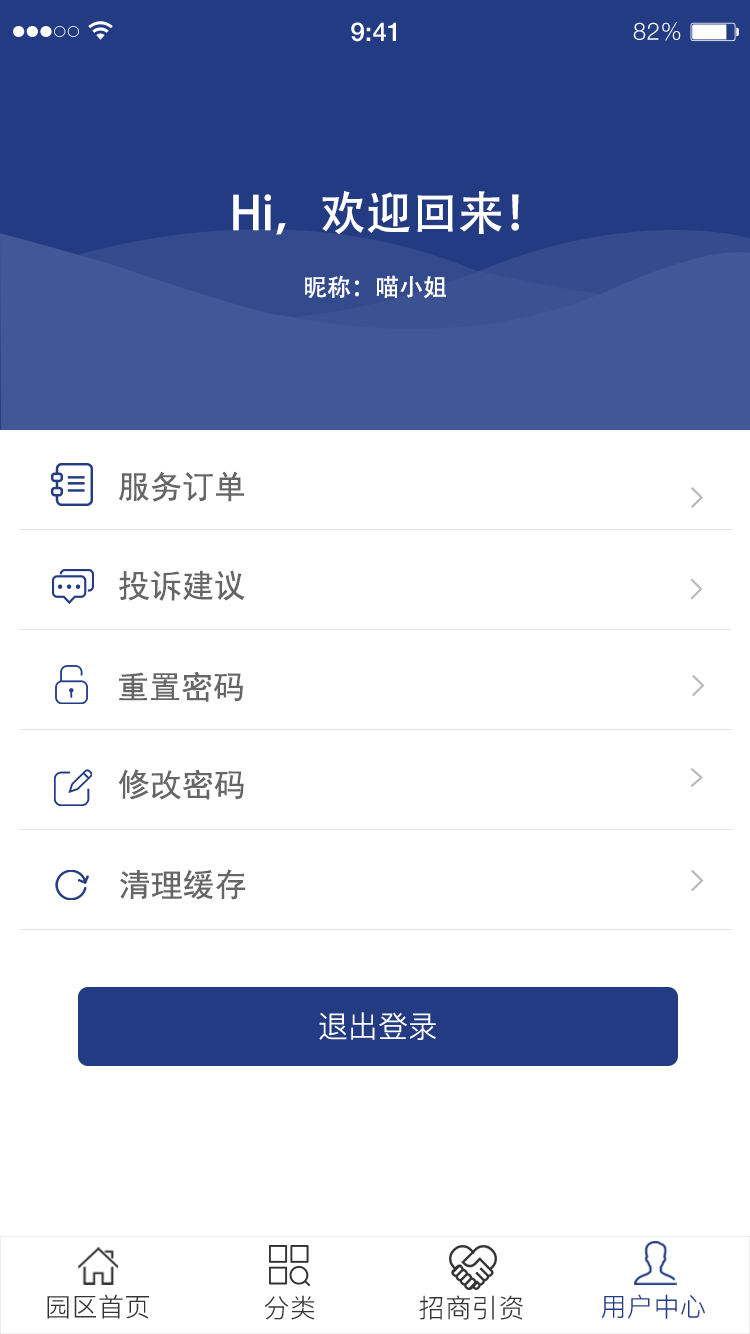
<style>
.page{position:relative;width:750px;height:1334px;background:#ffffff}
.page>*{position:absolute;margin:0}
.t1{font:26px "HelveticaNeue-Medium";color:#ffffff}
.t2{font:24px "HelveticaNeue-Light";letter-spacing:0.025em;color:#ffffff}
.t3{font:46px "AdobeHeitiStd-Regular";color:#ffffff}
.t4{font:24px "AdobeHeitiStd-Regular";color:#ffffff}
.t5{font:32px "SimHei";color:#666666}
.t6{font:30px "PingFang-SC-Regular";color:#ffffff}
.t7{font:26px "PingFang-SC-Regular";letter-spacing:0.02em;color:#333333}
.t8{font:26px "PingFang-SC-Regular";letter-spacing:0.02em;color:#323333}
.t9{font:26px "PingFang-SC-Regular";letter-spacing:0.02em;color:#233b83}
</style>
<div class="page">
<p class="t1" style="left:351px;top:22px;width:45px;height:20px">9:41</p>
<p class="t2" style="left:633px;top:22px;width:48px;height:19px">82%</p>
<p class="t3" style="left:233px;top:191px;width:286px;height:44px">Hi，欢迎回来！</p>
<p class="t4" style="left:305px;top:275px;width:141px;height:24px">昵称：喵小姐</p>
<p class="t5" style="left:119px;top:471px;width:125px;height:31px">服务订单</p>
<p class="t5" style="left:119px;top:570px;width:126px;height:31px">投诉建议</p>
<p class="t5" style="left:119px;top:671px;width:124px;height:31px">重置密码</p>
<p class="t5" style="left:118px;top:769px;width:126px;height:31px">修改密码</p>
<p class="t5" style="left:120px;top:869px;width:126px;height:31px">清理缓存</p>
<p class="t6" style="left:319px;top:1012px;width:117px;height:28px">退出登录</p>
<p class="t7" style="left:47px;top:1294px;width:102px;height:25px">园区首页</p>
<p class="t8" style="left:264px;top:1295px;width:51px;height:25px">分类</p>
<p class="t8" style="left:419px;top:1295px;width:104px;height:25px">招商引资</p>
<p class="t9" style="left:601px;top:1294px;width:104px;height:25px">用户中心</p>
</div>
